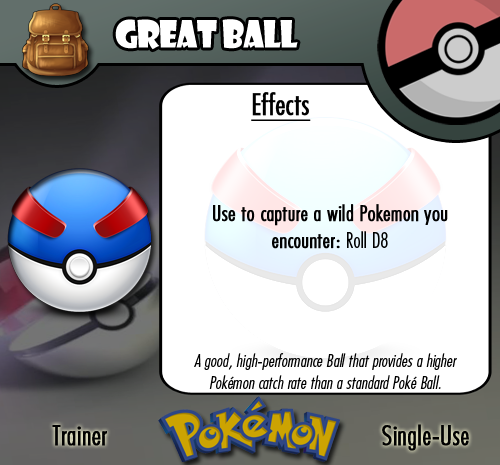
<style>
.page{position:relative;width:500px;height:465px;background:#ffffff}
.page>*{position:absolute;margin:0}
.t1{font:36.7px "ShowcardGothic-Reg";letter-spacing:-0.025em;color:#ffffff;scale:0.91 1}
.t2{font:22.2px "FuturaCondensedBQ-Light";color:#010101;font-weight:bold}
.t3{font:27.8px "FuturaCondensedBQ-Light";color:#010101;font-weight:bold}
.t4{font:30.6px "FuturaCondensedBQ-Light";color:#010101;font-weight:bold;text-decoration:underline}
.t5{font:22.2px "FuturaCondensedBQ-Light";color:#010101}
.t6{font:18.1px "FuturaCondensedBQ-Light";color:#010101;font-style:italic}
</style>
<div class="page">
<p class="t1" style="left:115px;top:19px;width:183px;height:31px">Great Ball</p>
<p class="t2" style="left:213px;top:92px;width:235px;height:157px"><span class="t3">  </span><span class="t4">Effects<br><br><br><br><br></span>Use to capture a wild Pokemon you encounter: <span class="t5">Roll D8</span></p>
<p class="t6" style="left:194px;top:353px;width:263px;height:36px;text-align:center">A good, high-performance Ball that provides a higher Pokémon catch rate than a standard Poké Ball.</p>
<p class="t3" style="left:52px;top:425px;width:55px;height:21px">Trainer</p>
<p class="t3" style="left:382px;top:424px;width:87px;height:27px">Single-Use</p>
</div>
